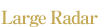
<style>
.page{position:relative;width:108px;height:27px;background:#ffffff}
.page>*{position:absolute;margin:0}
.t1{font:18px "RyuminPro-ExBold";letter-spacing:-0.08em;color:#c4a956}
</style>
<div class="page">
<p class="t1" style="left:1px;top:10px;width:97px;height:17px">Large Radar</p>
</div>
